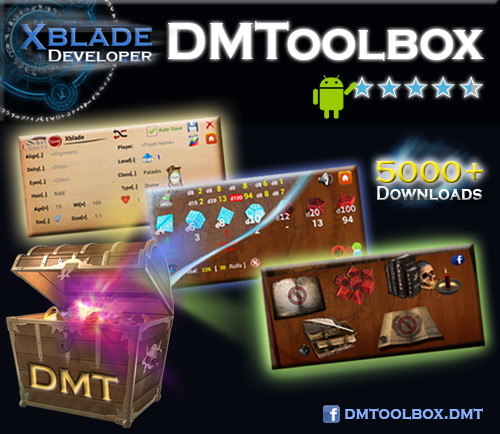
<style>
.page{position:relative;width:500px;height:434px}
.page>*{position:absolute;margin:0}
.t1{font:53.8px "CopperplateGothic-Bold";color:#ffffff;scale:0.92 1}
.t2{font:33.2px "CopperplateGothic-Bold";scale:0.93 1}
.t3{font:19.7px "CopperplateGothic-Bold";scale:0.83 1}
.t4{font:16.8px "CopperplateGothic-Bold";color:#88b2ff}
</style>
<div class="page">
<p class="t1" style="left:168px;top:21px;width:316px;height:40px">DMToolbox</p>
<p class="t2" style="left:376px;top:160px;width:107px;height:23px">5000+</p>
<p class="t3" style="left:377px;top:186px;width:105px;height:15px">Downloads</p>
<p class="t4" style="left:345px;top:408px;width:138px;height:12px">dmtoolbox.dmt</p>
</div>
